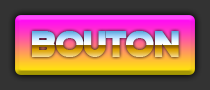
<style>
.page{position:relative;width:210px;height:90px;background:#333333}
.page>*{position:absolute;margin:0}
.t1{font:36px "DeathStar"}
</style>
<div class="page">
<p class="t1" style="left:32px;top:31px;width:147px;height:26px">BOUTON</p>
</div>
